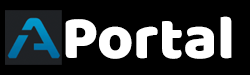
<style>
.page{position:relative;width:250px;height:75px;background:#000000}
.page>*{position:absolute;margin:0}
.t1{font:62px "BalooChettan-Regular";color:#ffffff}
</style>
<div class="page">
<p class="t1" style="left:65px;top:16px;width:167px;height:43px">Portal</p>
</div>
